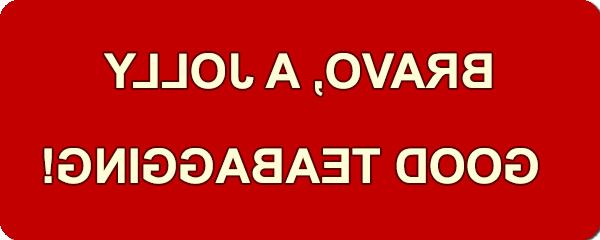
<style>
.page{position:relative;width:600px;height:240px;background:#c20000}
.page>*{position:absolute;margin:0}
.t1{font:48px "Arial-BoldMT";color:#fefdd6}
</style>
<div class="page">
<p class="t1" style="left:104px;top:53px;width:388px;height:43px;rotate:180deg">BRAVO, A JOLLY</p>
<p class="t1" style="left:44px;top:148px;width:494px;height:36px;rotate:180deg">GOOD TEABAGGING!</p>
</div>
